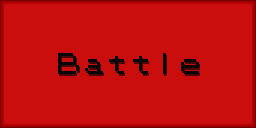
<style>
.page{position:relative;width:256px;height:128px;background:#ca0d0d}
.page>*{position:absolute;margin:0}
.t1{font:24px "PokemonGB";color:#060606}
</style>
<div class="page">
<p class="t1" style="left:58px;top:53px;width:141px;height:21px">Battle</p>
</div>
